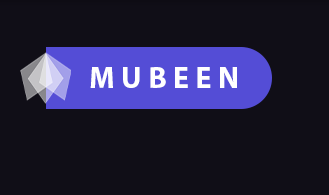
<style>
.page{position:relative;width:329px;height:195px;background:#100e17}
.page>*{position:absolute;margin:0}
.t1{font:30px "MyriadPro-Bold";letter-spacing:0.22em;color:#ffffff;text-transform:uppercase}
</style>
<div class="page">
<p class="t1" style="left:90px;top:67px;width:147px;height:21px">Mubeen</p>
</div>
